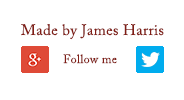
<style>
.page{position:relative;width:184px;height:100px;background:#ffffff}
.page>*{position:absolute;margin:0}
.t1{font:15.1px "ACaslonPro-Regular";letter-spacing:0.025em;color:#811e16}
.t2{font:12px "ACaslonPro-Regular";letter-spacing:0.025em;color:#811e16}
</style>
<div class="page">
<p class="t1" style="left:21px;top:24px;width:143px;height:16px">Made by James Harris</p>
<p class="t2" style="left:63px;top:54px;width:54px;height:10px">Follow me</p>
</div>
